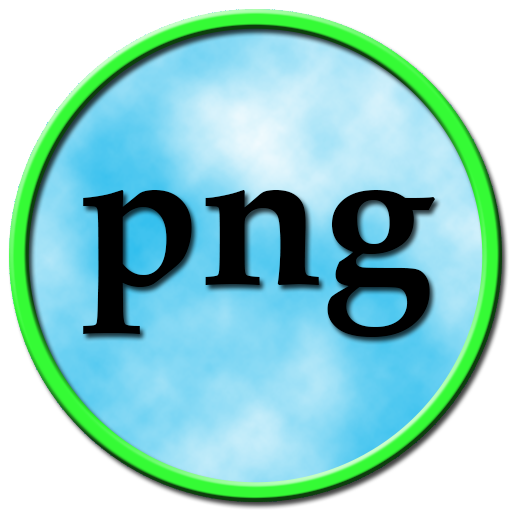
<style>
.page{position:relative;width:512px;height:512px;background:#ffffff}
.page>*{position:absolute;margin:0}
.t1{font:200px "BookAntiqua-Bold";color:#000000}
</style>
<div class="page">
<p class="t1" style="left:83px;top:190px;width:353px;height:147px">png</p>
</div>
